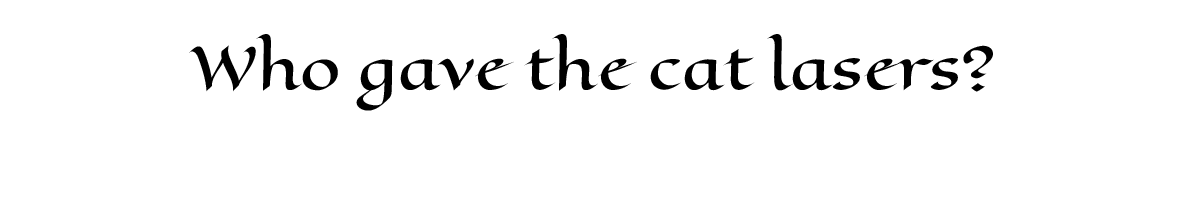
<style>
.page{position:relative;width:1179px;height:212px;background:#ffffff}
.page>*{position:absolute;margin:0}
.t1{font:58.3px "EagleLake-Regular";color:#000000}
</style>
<div class="page">
<p class="t1" style="left:189px;top:34px;width:804px;height:77px">Who gave the cat lasers?</p>
</div>
